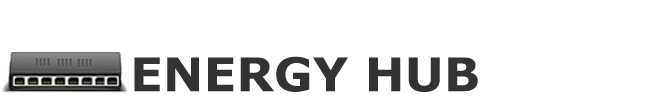
<style>
.page{position:relative;width:657px;height:99px;background:#ffffff}
.page>*{position:absolute;margin:0}
.t1{font:46.1px "Verdana-Bold";color:#333333;scale:1.04 1}
</style>
<div class="page">
<p class="t1" style="left:134px;top:56px;width:344px;height:36px">ENERGY HUB</p>
</div>
